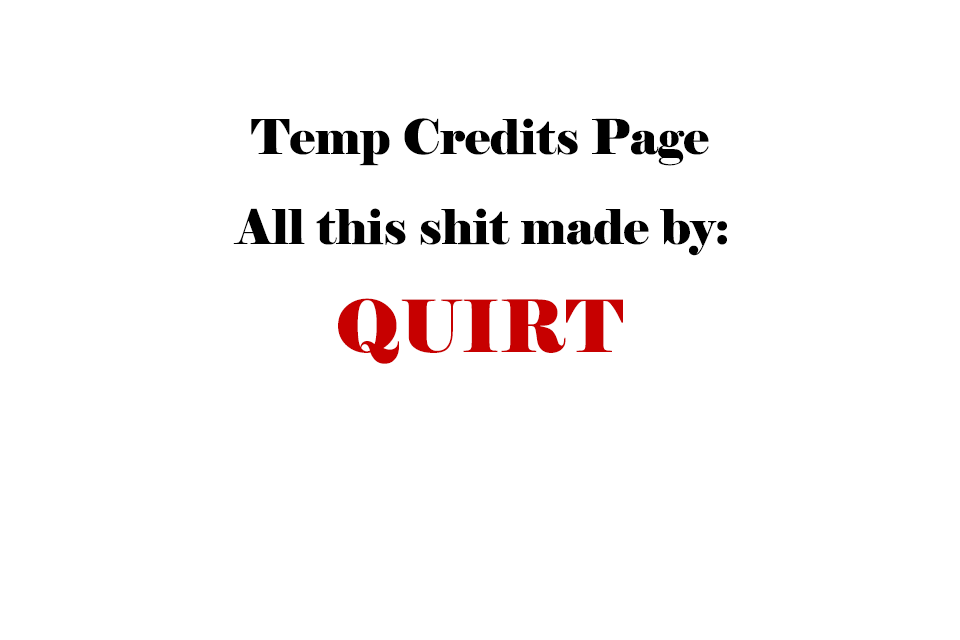
<style>
.page{position:relative;width:960px;height:640px;background:#ffffff}
.page>*{position:absolute;margin:0}
.t1{font:48px "Elephant-Regular";color:#000000}
.t2{font:72px "Elephant-Regular";color:#c70000}
</style>
<div class="page">
<p class="t1" style="left:251px;top:118px;width:458px;height:48px">Temp Credits Page</p>
<p class="t1" style="left:233px;top:208px;width:494px;height:48px">All this shit made by:</p>
<p class="t2" style="left:338px;top:298px;width:285px;height:66px">QUIRT</p>
</div>
